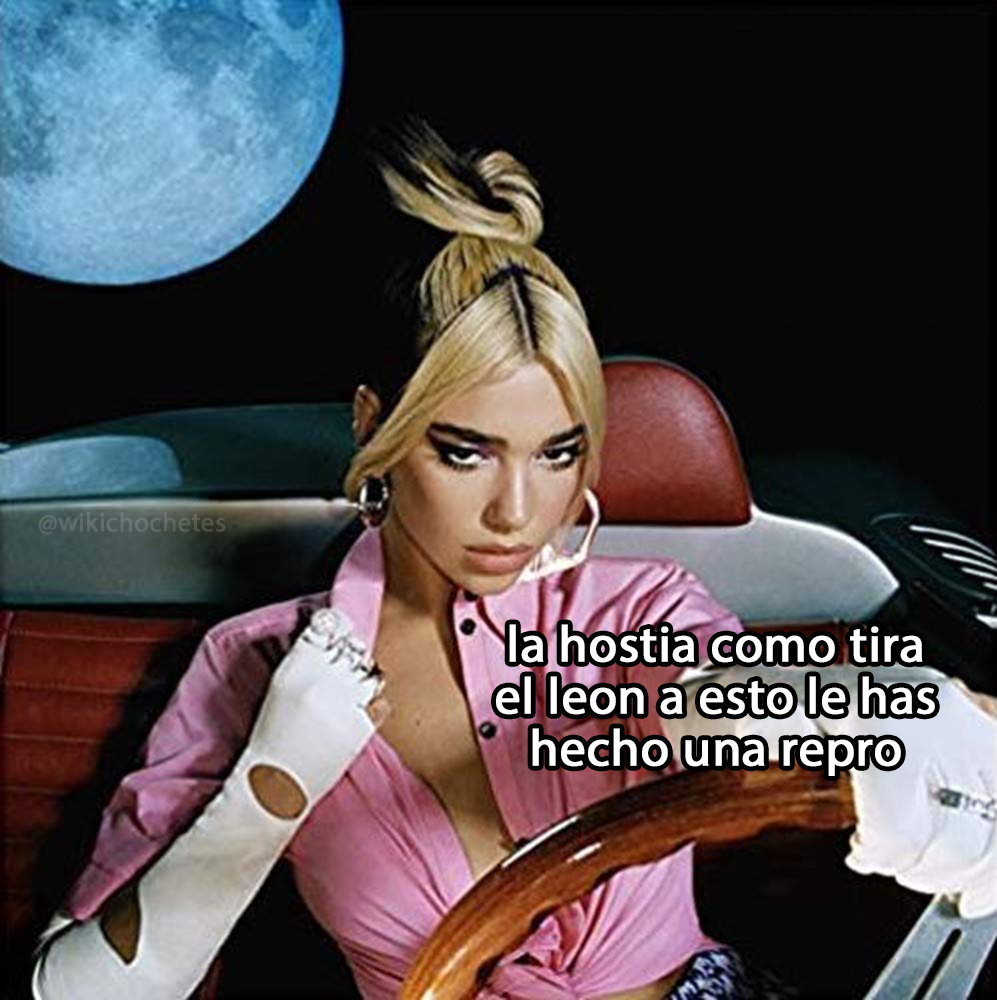
<style>
.page{position:relative;width:997px;height:1000px}
.page>*{position:absolute;margin:0}
.t1{font:26.6px "MyriadPro-Regular";color:#606d6a;font-weight:bold}
.t2{font:51.3px "MyriadPro-Regular";color:#ffffff;font-weight:bold}
</style>
<div class="page">
<p class="t1" style="left:38px;top:512px;width:188px;height:23px">@wikichochetes</p>
<p class="t2" style="left:496px;top:624px;width:439px;height:152px;text-align:center">la hostia como tira<br>el leon a esto le has<br>hecho una repro</p>
</div>
